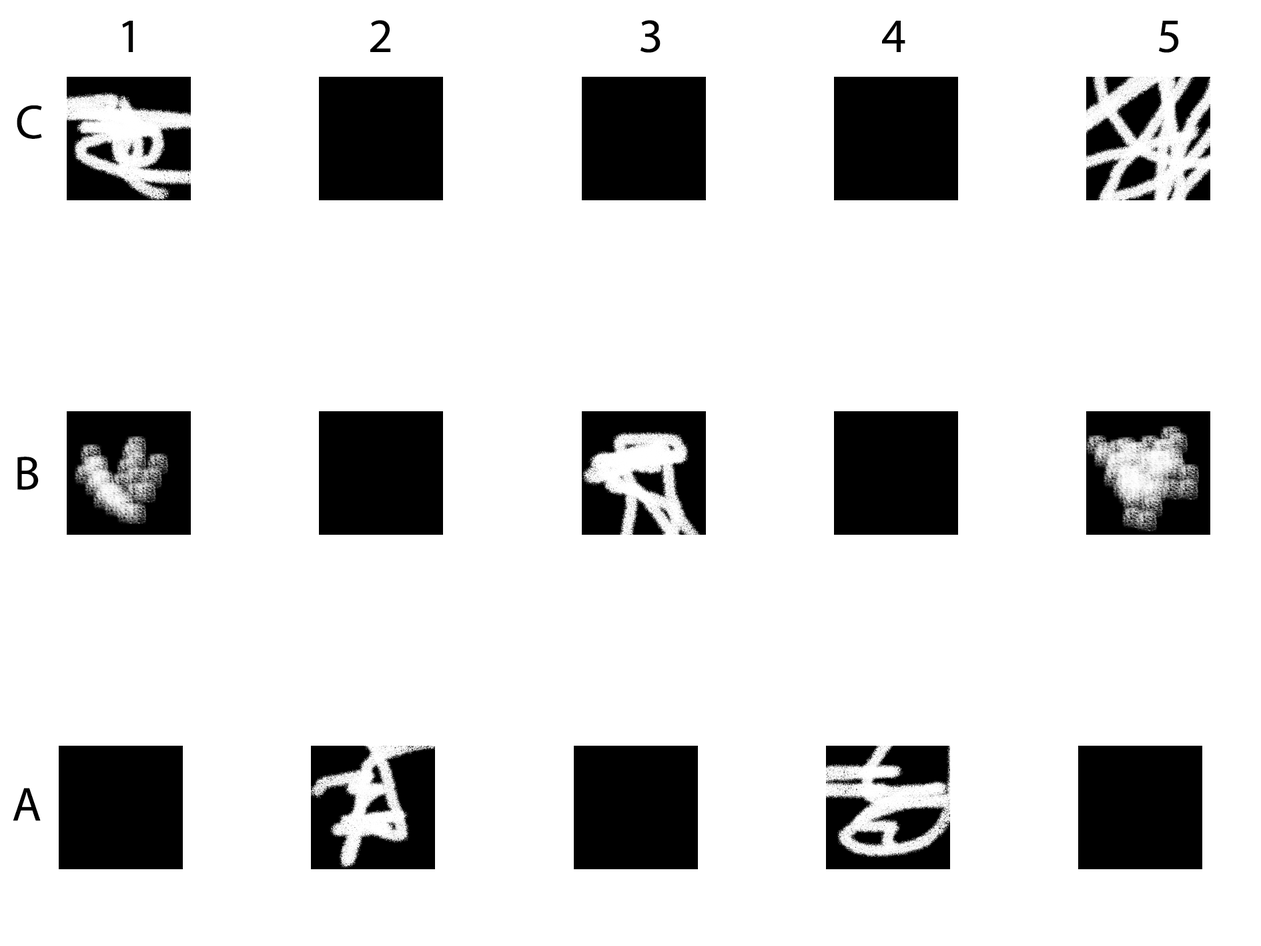
<style>
.page{position:relative;width:1261px;height:946px;background:#ffffff}
.page>*{position:absolute;margin:0}
.t1{font:48px "MyriadPro-Regular";letter-spacing:0.023em;color:#000000}
</style>
<div class="page">
<p class="t1" style="left:122px;top:21px;width:11px;height:31px">1</p>
<p class="t1" style="left:370px;top:20px;width:21px;height:32px">2</p>
<p class="t1" style="left:641px;top:20px;width:20px;height:33px">3</p>
<p class="t1" style="left:882px;top:21px;width:23px;height:31px">4</p>
<p class="t1" style="left:1159px;top:21px;width:20px;height:32px">5</p>
<p class="t1" style="left:17px;top:105px;width:25px;height:34px">C</p>
<p class="t1" style="left:17px;top:456px;width:22px;height:34px">B</p>
<p class="t1" style="left:13px;top:787px;width:28px;height:34px">A</p>
</div>
